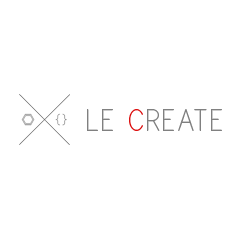
<style>
.page{position:relative;width:240px;height:240px;background:#ffffff}
.page>*{position:absolute;margin:0}
.t1{font:36px "PrintClearly";color:#808080}
.t2{font:36px "PrintClearly";color:#dc1010}
</style>
<div class="page">
<p class="t1" style="left:87px;top:109px;width:135px;height:22px">LE <span class="t2">C</span>REATE</p>
</div>
